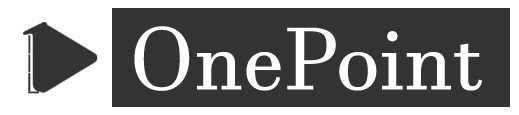
<style>
.page{position:relative;width:519px;height:115px;background:#333333}
.page>*{position:absolute;margin:0}
.t1{font:86.7px "JavaneseText";color:#ffffff}
</style>
<div class="page">
<p class="t1" style="left:134px;top:26px;width:349px;height:65px">OnePoint</p>
</div>
